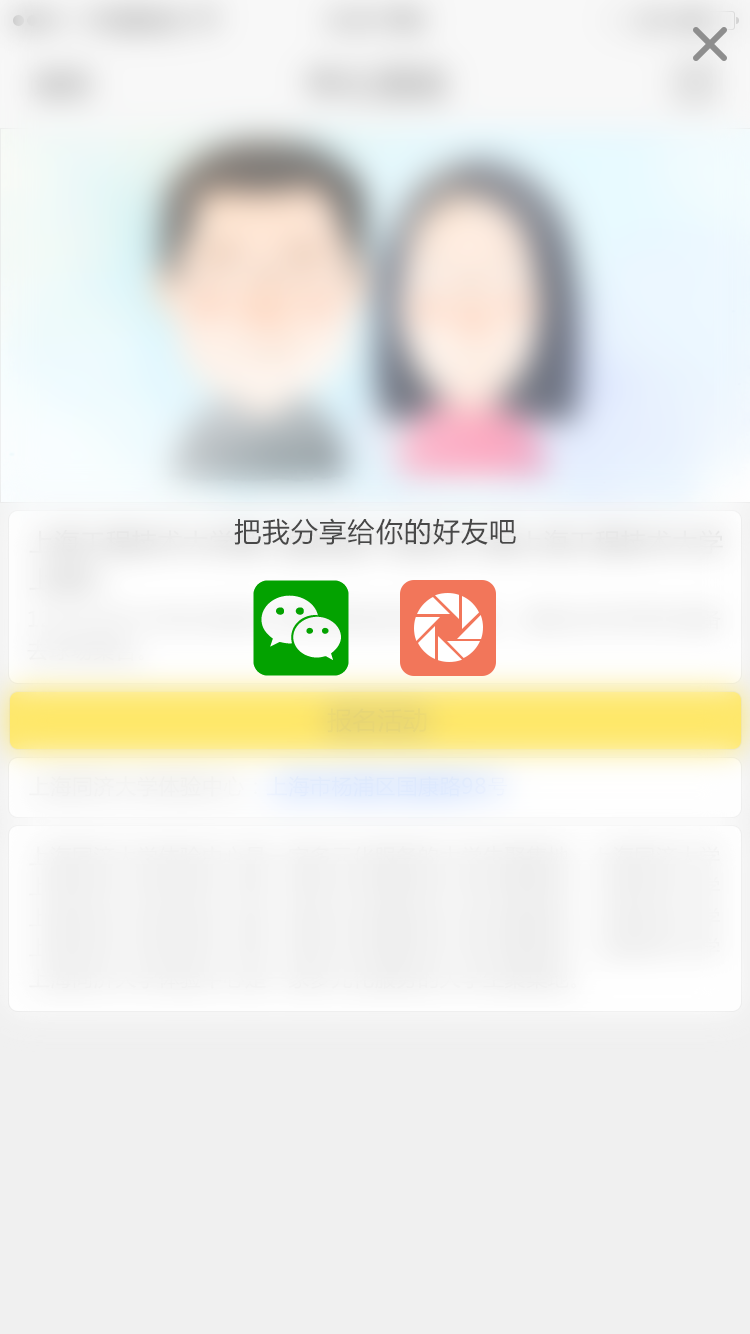
<style>
.page{position:relative;width:750px;height:1334px;background:#f0f0f0}
.page>*{position:absolute;margin:0}
.t1{font:27px "MicrosoftYaHei";letter-spacing:0.05em;color:#484848}
.t2{font:25px "MicrosoftYaHei";letter-spacing:0.01em;color:#e8d674}
.t3{font:21px "MicrosoftYaHei";letter-spacing:0.03em;color:#ebf1fb}
.t4{font:21px "STHeitiSC-Light";letter-spacing:0.03em;color:#ebf1fb}
</style>
<div class="page">
<p class="t1" style="left:234px;top:518px;width:282px;height:27px">把我分享给你的好友吧</p>
<p class="t2" style="left:327px;top:708px;width:100px;height:25px">报名活动</p>
<p class="t3" style="left:29px;top:776px;width:478px;height:21px">上海同济大学体验中心：上海市杨浦区国康路98<span class="t4">号</span></p>
</div>
